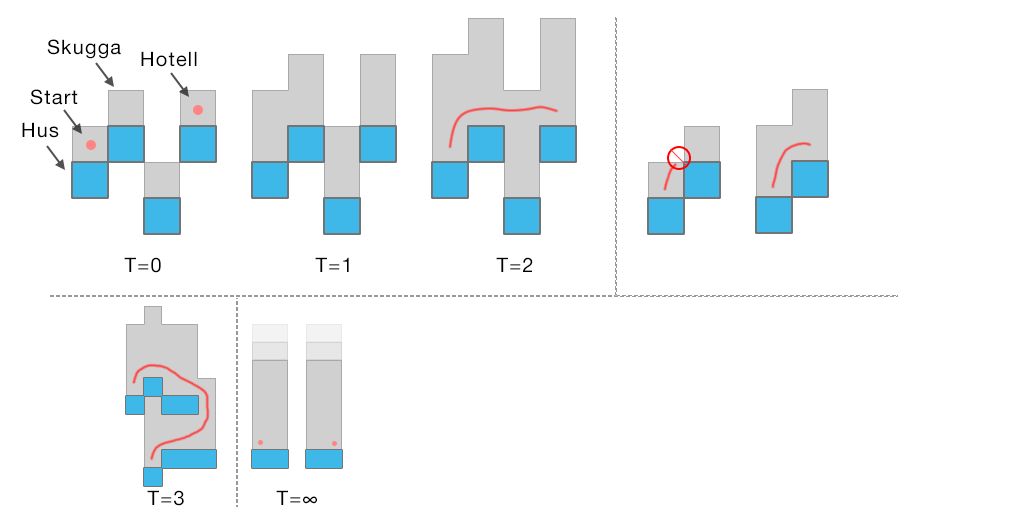
<style>
.page{position:relative;width:1024px;height:512px;background:#ffffff}
.page>*{position:absolute;margin:0}
.t1{font:20px "HelveticaNeue";letter-spacing:0.06em;color:#000000}
</style>
<div class="page">
<p class="t1" style="left:47px;top:39px;width:74px;height:20px">Skugga</p>
<p class="t1" style="left:141px;top:51px;width:56px;height:16px">Hotell</p>
<p class="t1" style="left:30px;top:89px;width:48px;height:16px">Start</p>
<p class="t1" style="left:22px;top:122px;width:37px;height:16px">Hus</p>
<p class="t1" style="left:124px;top:257px;width:37px;height:16px">T=0</p>
<p class="t1" style="left:315px;top:257px;width:34px;height:15px">T=1</p>
<p class="t1" style="left:496px;top:257px;width:37px;height:15px">T=2</p>
<p class="t1" style="left:147px;top:490px;width:37px;height:16px">T=3</p>
<p class="t1" style="left:276px;top:490px;width:41px;height:15px">T=∞</p>
</div>
